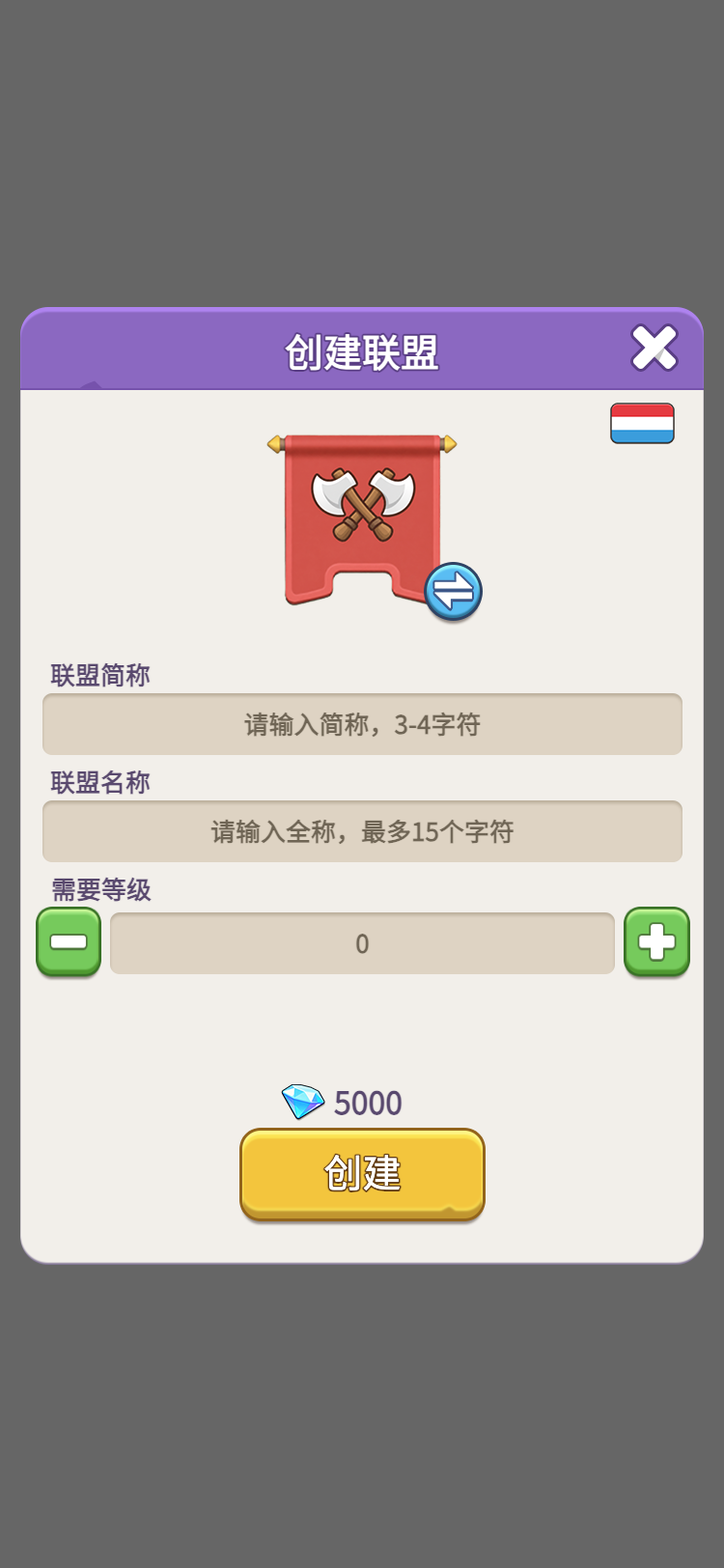
<style>
.page{position:relative;width:724px;height:1568px;background:#666666}
.page>*{position:absolute;margin:0}
.t1{font:38.6px "WebPSD-18463539-0-Regular";color:#ffffff;font-weight:bold}
.t2{font:25.1px "WebPSD-18463539-0-Regular";color:#59496e;font-weight:bold}
.t3{font:25.1px/25.1px "WebPSD-18463539-0-Regular";color:#6f6555;font-weight:bold}
.t4{font:30.9px "WebPSD-18463539-0-Regular";color:#59496e;font-weight:bold}
</style>
<div class="page">
<p class="t1" style="left:107px;top:324px;width:510px;height:56px">创建联盟</p>
<p class="t2" style="left:50px;top:662px;width:155px;height:25px">联盟简称</p>
<p class="t2" style="left:50px;top:770px;width:155px;height:25px">联盟名称</p>
<p class="t2" style="left:51px;top:877px;width:155px;height:25px">需要等级</p>
<p class="t3" style="left:110px;top:912px;width:505px;height:62px;text-align:center">0</p>
<p class="t4" style="left:334px;top:1084px;width:87px;height:37px">5000</p>
</div>
